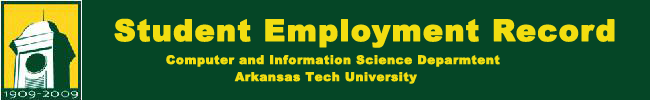
<style>
.page{position:relative;width:650px;height:100px;background:#054626}
.page>*{position:absolute;margin:0}
.t1{font:30px "Arial-Black";letter-spacing:0.02em;color:#f2dd10;font-weight:bold}
.t2{font:12px "Arial-Black";letter-spacing:0.02em;color:#f2dd10;font-weight:bold}
</style>
<div class="page">
<p class="t1" style="left:114px;top:18px;width:501px;height:30px">Student Employment Record</p>
<p class="t2" style="left:166px;top:55px;width:334px;height:12px">Computer and Information Science Deparmtent</p>
<p class="t2" style="left:234px;top:72px;width:183px;height:12px">Arkansas Tech University</p>
</div>
